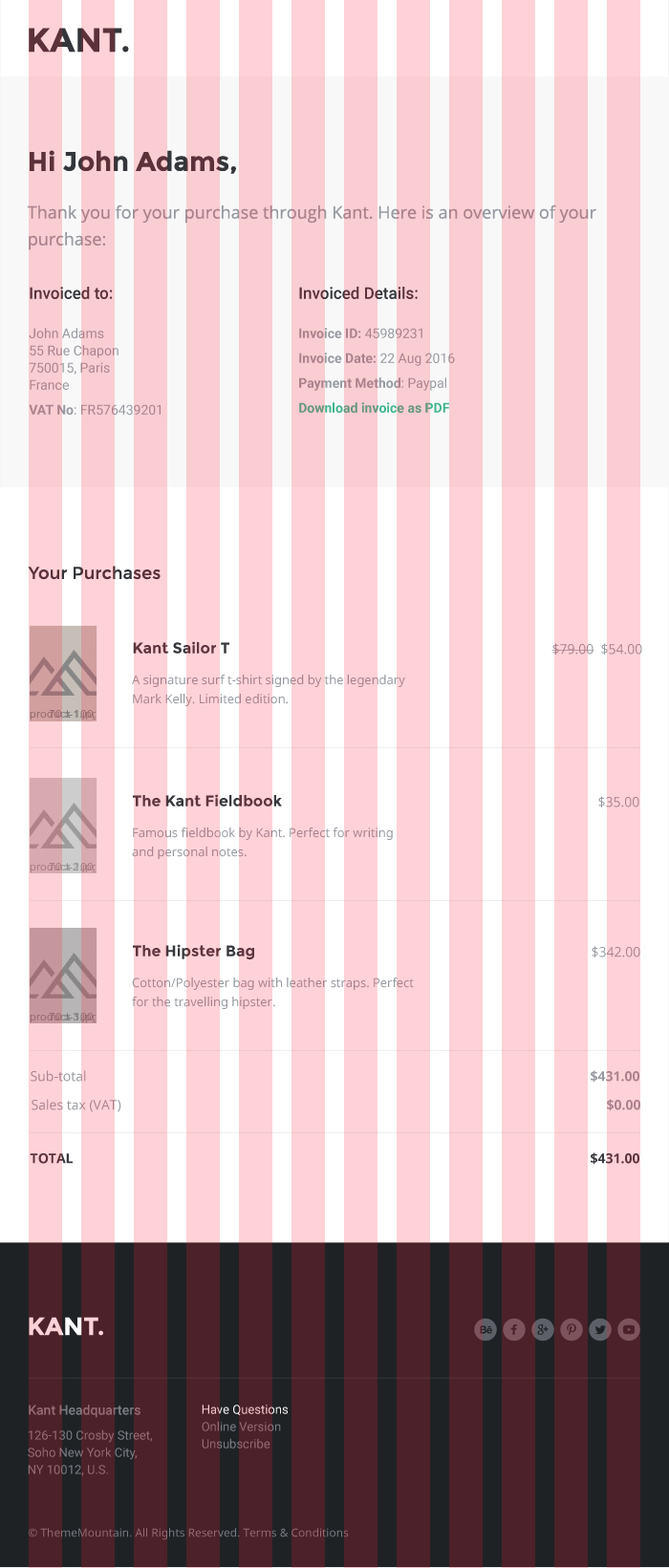
<style>
.page{position:relative;width:669px;height:1568px;background:#ffd2d7}
.page>*{position:absolute;margin:0}
.t1{font:33.4px "Montserrat-Bold";color:#5c313a}
.t2{font:26.8px "Montserrat-Bold"}
.t3{font:17.2px/26.8px "OpenSans"}
.t4{font:13.4px/17.2px "Roboto-Regular"}
.t5{font:16.2px/22px "Roboto-Medium"}
.t6{font:13.4px/24.8px "Roboto-Bold"}
.t7{font:13.4px/24.8px "Roboto-Regular"}
.t8{font:13.4px/17.2px "Roboto-Bold"}
.t9{font:17.2px "Montserrat-Regular";color:#5c313a}
.t10{font:15.3px "Montserrat-Bold";color:#60343d}
.t11{font:13.4px "OpenSans";color:#ab818c}
.t12{font:12.4px/19.1px "OpenSans"}
.t13{font:15.3px "Montserrat-Bold"}
.t14{font:13.4px "OpenSans"}
.t15{font:12.4px/19.1px "OpenSans";color:#ab818c}
.t16{font:13.4px "OpenSans-Bold"}
.t17{font:13.4px "OpenSans-Bold";color:#ab818c}
.t18{font:13.4px "OpenSans-Bold";color:#60343d}
.t19{font:24.8px "Montserrat-Bold"}
.t20{font:13.4px "Roboto-Medium";color:#956a75}
.t21{font:12.4px/17.2px "Roboto-Regular"}
.t22{font:12.4px/17.2px "Roboto-Regular";color:#956a75}
.t23{font:11.5px "OpenSans";color:#956a75}
</style>
<div class="page">
<p class="t1" style="left:29px;top:28px;width:100px;height:25px">KANT.</p>
<p class="t2" style="left:30px;top:150px;width:206px;height:24px">Hi John Adams,</p>
<p class="t3" style="left:27px;top:204px;width:569px;height:46px">Thank you for your purchase through Kant. Here is an overview of your <br>purchase:</p>
<p class="t4" style="left:29px;top:287px;width:132px;height:128px"><span class="t5">Invoiced to:<br><br></span>John Adams<br>55 Rue Chapon<br>750015, Paris<br>France<br><span class="t6">VAT No</span><span class="t7">: FR576439201</span></p>
<p class="t6" style="left:299px;top:287px;width:156px;height:126px"><span class="t5">Invoiced Details:<br><br></span><span class="t8">Invoice ID:</span><span class="t4"> 45989231<br></span>Invoice Date:<span class="t7"> 22 Aug 2016<br></span>Payment Method<span class="t7">: Paypal<br></span>Download invoice as PDF</p>
<p class="t9" style="left:28px;top:566px;width:133px;height:14px">Your Purchases</p>
<p class="t10" style="left:133px;top:641px;width:96px;height:13px">Kant Sailor T</p>
<p class="t11" style="left:551px;top:643px;width:91px;height:12px">$79.00  $54.00</p>
<p class="t12" style="left:132px;top:675px;width:273px;height:31px;text-align:justify">A signature surf t-shirt signed by the legendary<br>Mark Kelly. Limited edition.</p>
<p class="t13" style="left:133px;top:794px;width:149px;height:12px">The Kant Fieldbook</p>
<p class="t14" style="left:598px;top:796px;width:41px;height:11px">$35.00</p>
<p class="t15" style="left:132px;top:827px;width:261px;height:32px;text-align:justify">Famous fieldbook by Kant. Perfect for writing<br>and personal notes.</p>
<p class="t13" style="left:133px;top:944px;width:121px;height:16px">The Hipster Bag</p>
<p class="t14" style="left:591px;top:946px;width:49px;height:11px">$342.00</p>
<p class="t12" style="left:132px;top:977px;width:282px;height:32px;text-align:justify">Cotton/Polyester bag with leather straps. Perfect<br>for the travelling hipster.</p>
<p class="t11" style="left:31px;top:1070px;width:55px;height:12px">Sub-total</p>
<p class="t16" style="left:591px;top:1070px;width:48px;height:13px">$431.00</p>
<p class="t14" style="left:32px;top:1099px;width:89px;height:13px">Sales tax (VAT)</p>
<p class="t17" style="left:607px;top:1099px;width:33px;height:12px">$0.00</p>
<p class="t18" style="left:30px;top:1153px;width:43px;height:11px">TOTAL</p>
<p class="t16" style="left:591px;top:1152px;width:48px;height:13px">$431.00</p>
<p class="t19" style="left:29px;top:1317px;width:74px;height:19px">KANT.</p>
<p class="t20" style="left:29px;top:1405px;width:111px;height:13px">Kant Headquarters</p>
<p class="t21" style="left:202px;top:1405px;width:86px;height:44px">Have Questions<br>Online Version<br>Unsubscribe</p>
<p class="t22" style="left:28px;top:1429px;width:124px;height:47px">126-130 Crosby Street,<br>Soho New York City,<br>NY 10012, U.S.</p>
<p class="t23" style="left:28px;top:1528px;width:321px;height:12px">© ThemeMountain. All Rights Reserved. Terms &amp; Conditions</p>
</div>
